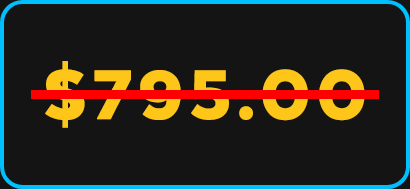
<style>
.page{position:relative;width:410px;height:189px;background:#141414}
.page>*{position:absolute;margin:0}
.t1{font:80px "Texta-Black";letter-spacing:0.05em;color:#ffc61a;font-weight:bold}
</style>
<div class="page">
<p class="t1" style="left:45px;top:61px;width:320px;height:67px">$795.00</p>
</div>
